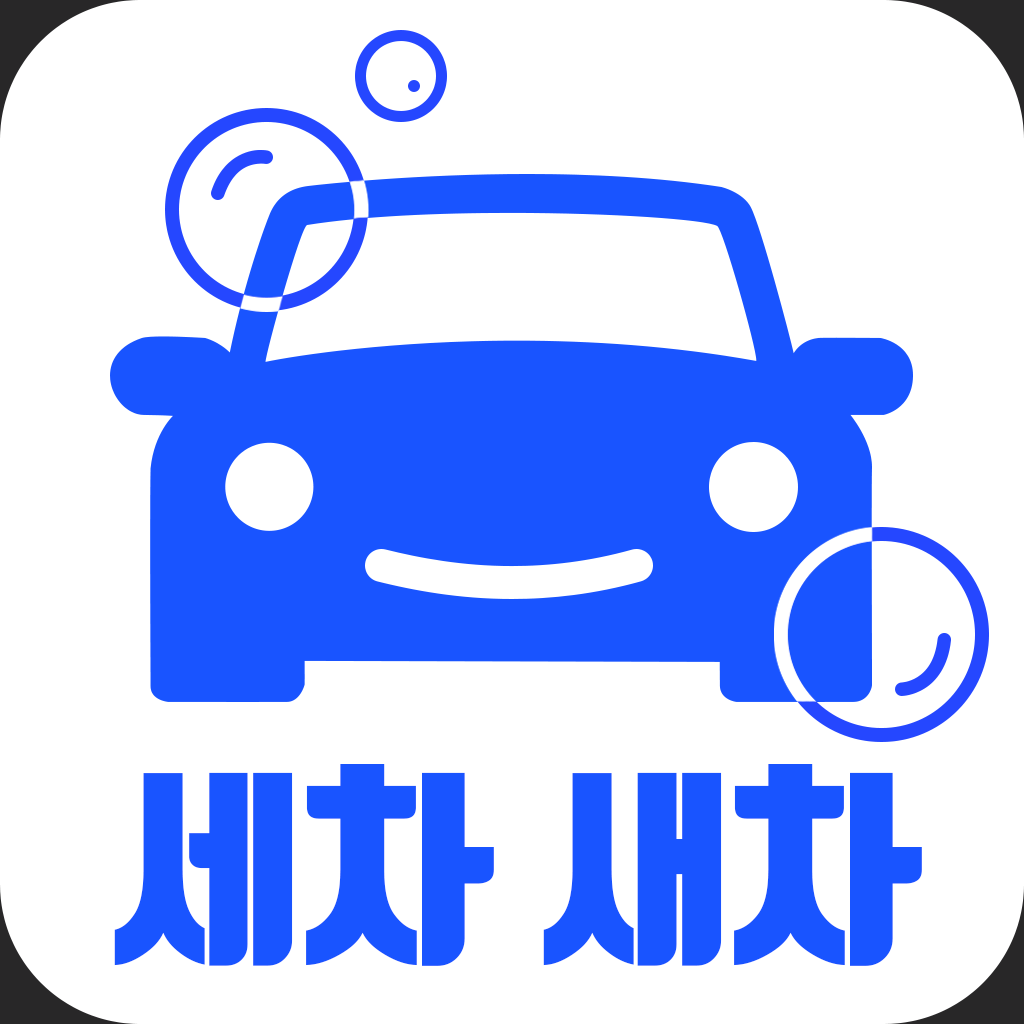
<style>
.page{position:relative;width:1024px;height:1024px;background:#ffffff}
.page>*{position:absolute;margin:0}
.t1{font:210.2px "TmonMonsoriBlack";letter-spacing:-0.01em;color:#1954ff}
</style>
<div class="page">
<p class="t1" style="left:114px;top:764px;width:808px;height:202px">세차 새차</p>
</div>
